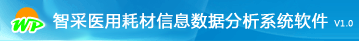
<style>
.page{position:relative;width:359px;height:41px}
.page>*{position:absolute;margin:0}
.t1{font:16px "MicrosoftYaHei";letter-spacing:0.05em;color:#ffffff;font-weight:bold}
.t2{font:8px "MicrosoftYaHei";letter-spacing:0.05em;color:#ffffff;font-weight:bold}
</style>
<div class="page">
<p class="t1" style="left:53px;top:12px;width:300px;height:17px">智采医用耗材信息数据分析系统软件 <span class="t2">V1.0</span></p>
</div>
